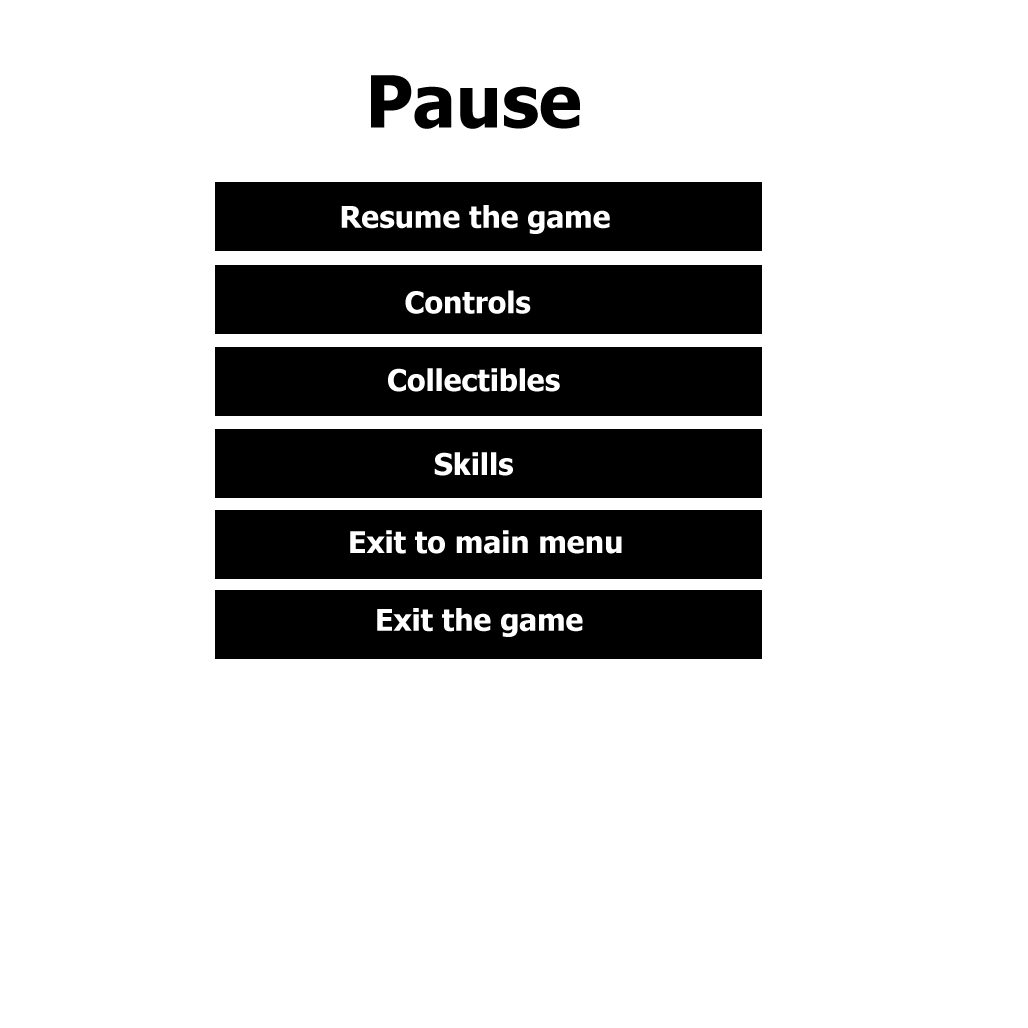
<style>
.page{position:relative;width:1028px;height:1028px;background:#ffffff}
.page>*{position:absolute;margin:0}
.t1{font:72px "Tahoma-Bold";color:#000000}
.t2{font:30px "Tahoma-Bold";color:#ffffff}
</style>
<div class="page">
<p class="t1" style="left:371px;top:75px;width:209px;height:54px">Pause</p>
<p class="t2" style="left:341px;top:205px;width:269px;height:29px">Resume the game</p>
<p class="t2" style="left:405px;top:290px;width:126px;height:24px">Controls</p>
<p class="t2" style="left:388px;top:368px;width:172px;height:24px">Collectibles</p>
<p class="t2" style="left:434px;top:452px;width:79px;height:24px">Skills</p>
<p class="t2" style="left:350px;top:530px;width:272px;height:24px">Exit to main menu</p>
<p class="t2" style="left:377px;top:608px;width:206px;height:29px">Exit the game</p>
</div>
